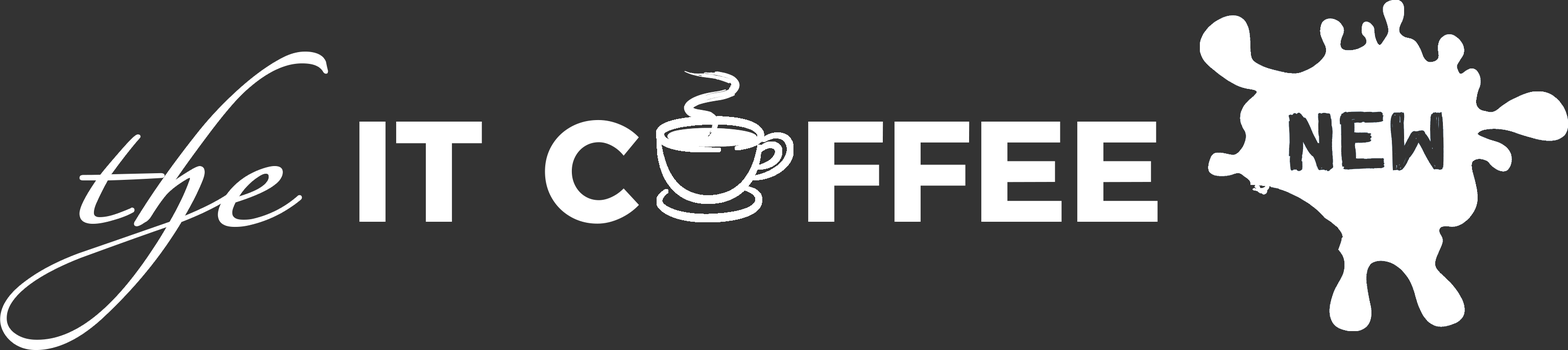
<style>
.page{position:relative;width:1568px;height:350px;background:#333333}
.page>*{position:absolute;margin:0}
.t1{font:249px "Vni15LinotypeZapfinotwo";color:#ffffff;scale:1.17 1}
.t2{font:142.7px "Montserrat-Bold";color:#ffffff}
</style>
<div class="page">
<p class="t1" style="left:2px;top:53px;width:325px;height:295px">the</p>
<p class="t2" style="left:359px;top:119px;width:799px;height:105px">IT C     FFEE</p>
</div>
